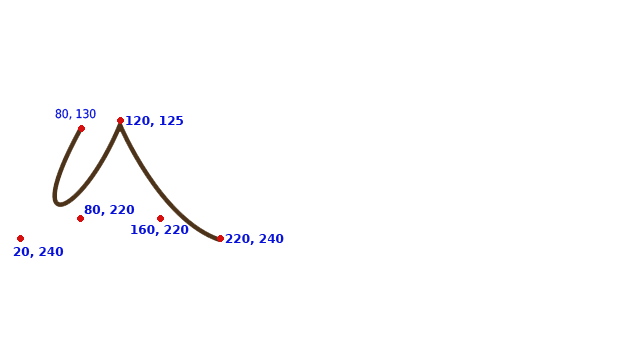
<style>
.page{position:relative;width:640px;height:359px;background:#ffffff}
.page>*{position:absolute;margin:0}
.t1{font:12px "DejaVuSansCondensed";color:#0711da}
.t2{font:12px "DejaVuSans-Bold";color:#0711da}
</style>
<div class="page">
<p class="t1" style="left:55px;top:108px;width:41px;height:12px">80, 130</p>
<p class="t2" style="left:126px;top:116px;width:57px;height:11px">120, 125</p>
<p class="t2" style="left:84px;top:205px;width:51px;height:11px">80, 220</p>
<p class="t2" style="left:131px;top:225px;width:58px;height:11px">160, 220</p>
<p class="t2" style="left:225px;top:234px;width:59px;height:11px">220, 240</p>
<p class="t2" style="left:13px;top:247px;width:51px;height:11px">20, 240</p>
</div>
